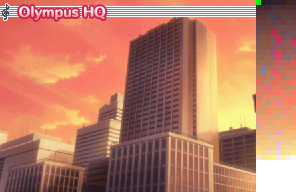
<style>
.page{position:relative;width:296px;height:192px}
.page>*{position:absolute;margin:0}
.t1{font:12px "HummingStd-E";letter-spacing:0.02em}
</style>
<div class="page">
<p class="t1" style="left:19px;top:6px;width:87px;height:14px">Olympus HQ</p>
</div>
